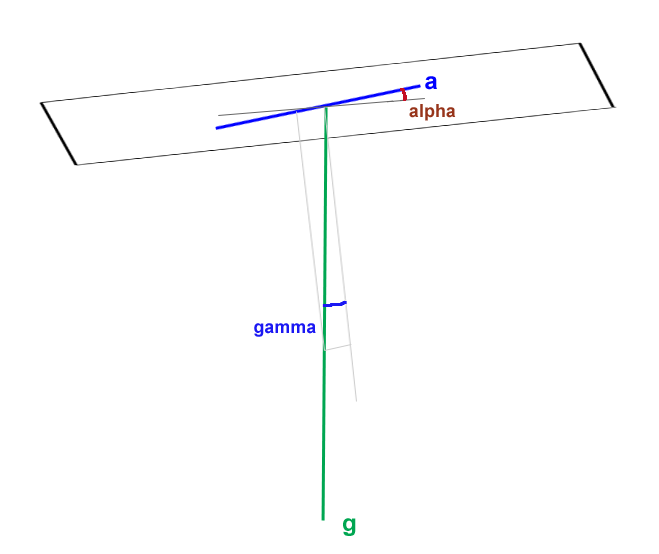
<style>
.page{position:relative;width:659px;height:554px;background:#ffffff}
.page>*{position:absolute;margin:0}
.t1{font:24px "Arial-BoldMT";color:#0000ff}
.t2{font:18px "Arial-BoldMT";color:#97351b}
.t3{font:18px "Arial-BoldMT";color:#1b18f3}
.t4{font:24px "Arial-BoldMT";color:#00a651}
</style>
<div class="page">
<p class="t1" style="left:425px;top:76px;width:12px;height:14px">a</p>
<p class="t2" style="left:409px;top:104px;width:47px;height:17px">alpha</p>
<p class="t3" style="left:254px;top:323px;width:62px;height:14px">gamma</p>
<p class="t4" style="left:343px;top:518px;width:13px;height:18px">g</p>
</div>
